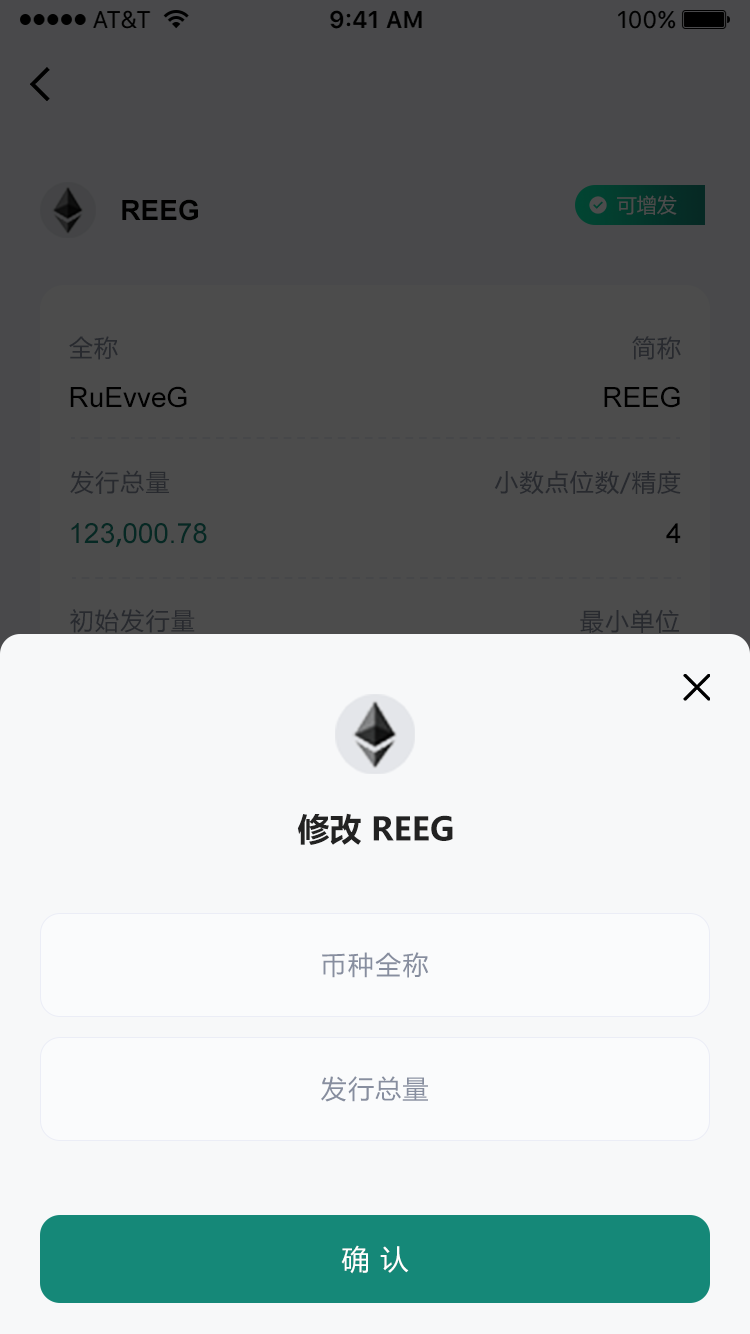
<style>
.page{position:relative;width:750px;height:1334px;background:#f7f8f9}
.page>*{position:absolute;margin:0}
.t1{font:20px "MicrosoftYaHei";color:#4c4c4c}
.t2{font:28px "Arial-BoldMT";color:#000000}
.t3{font:24px "MicrosoftYaHei";letter-spacing:0.05em;color:#282a2f}
.t4{font:28px "ArialMT";color:#000000}
.t5{font:28px "ArialMT";color:#062924}
.t6{font:28px "AdobeHeitiStd-Regular";color:#062924}
.t7{font:32px "MicrosoftYaHei-Bold";color:#222222}
.t8{font:26px "MicrosoftYaHei";letter-spacing:0.05em;color:#878e9f}
.t9{font:28px "MicrosoftYaHei";letter-spacing:0.05em;color:#ffffff}
</style>
<div class="page">
<p class="t1" style="left:617px;top:195px;width:60px;height:20px">可增发</p>
<p class="t2" style="left:122px;top:199px;width:76px;height:22px">REEG</p>
<p class="t3" style="left:69px;top:336px;width:49px;height:24px">全称</p>
<p class="t3" style="left:632px;top:336px;width:49px;height:24px">简称</p>
<p class="t4" style="left:70px;top:386px;width:117px;height:22px">RuEvveG</p>
<p class="t4" style="left:604px;top:386px;width:76px;height:22px">REEG</p>
<p class="t3" style="left:70px;top:470px;width:99px;height:24px">发行总量</p>
<p class="t3" style="left:494px;top:470px;width:187px;height:25px">小数点位数/精度</p>
<p class="t5" style="left:71px;top:523px;width:136px;height:24px">123<span class="t6">,</span>000.78</p>
<p class="t4" style="left:666px;top:523px;width:15px;height:20px">4</p>
<p class="t3" style="left:70px;top:609px;width:125px;height:24px">初始发行量</p>
<p class="t3" style="left:580px;top:609px;width:99px;height:24px">最小单位</p>
<p class="t7" style="left:297px;top:813px;width:156px;height:32px">修改 REEG</p>
<p class="t8" style="left:322px;top:952px;width:107px;height:26px">币种全称</p>
<p class="t8" style="left:321px;top:1076px;width:107px;height:26px">发行总量</p>
<p class="t9" style="left:341px;top:1245px;width:68px;height:29px">确 认</p>
</div>
